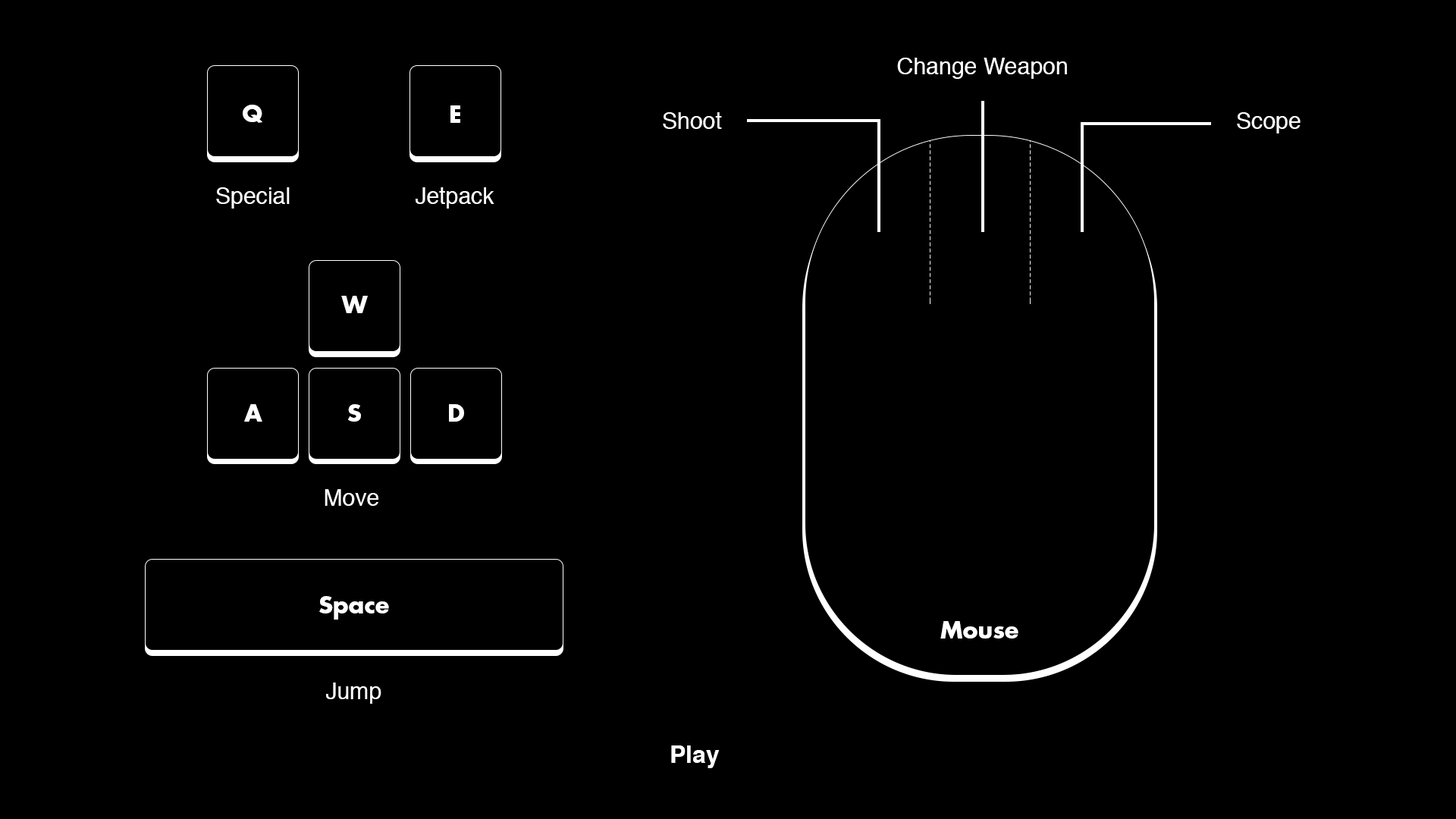
<style>
.page{position:relative;width:1456px;height:819px;background:#000000}
.page>*{position:absolute;margin:0}
.t1{font:22.9px "Helvetica";color:#ffffff}
.t2{font:22.9px "Futura-Bold";color:#ffffff}
.t3{font:24.3px "Helvetica-Bold";color:#ffffff}
</style>
<div class="page">
<p class="t1" style="left:897px;top:58px;width:170px;height:21px">Change Weapon</p>
<p class="t2" style="left:243px;top:105px;width:19px;height:18px">Q</p>
<p class="t2" style="left:450px;top:105px;width:10px;height:18px">E</p>
<p class="t1" style="left:663px;top:112px;width:59px;height:17px">Shoot</p>
<p class="t1" style="left:1237px;top:112px;width:64px;height:21px">Scope</p>
<p class="t1" style="left:216px;top:187px;width:74px;height:22px">Special</p>
<p class="t1" style="left:416px;top:187px;width:78px;height:22px">Jetpack</p>
<p class="t2" style="left:341px;top:296px;width:27px;height:17px">W</p>
<p class="t2" style="left:244px;top:404px;width:18px;height:18px">A</p>
<p class="t2" style="left:348px;top:404px;width:13px;height:18px">S</p>
<p class="t2" style="left:449px;top:404px;width:15px;height:18px">D</p>
<p class="t1" style="left:325px;top:489px;width:53px;height:17px">Move</p>
<p class="t2" style="left:319px;top:596px;width:70px;height:24px">Space</p>
<p class="t2" style="left:940px;top:621px;width:78px;height:18px">Mouse</p>
<p class="t1" style="left:326px;top:682px;width:55px;height:22px">Jump</p>
<p class="t3" style="left:671px;top:745px;width:49px;height:23px">Play</p>
</div>
